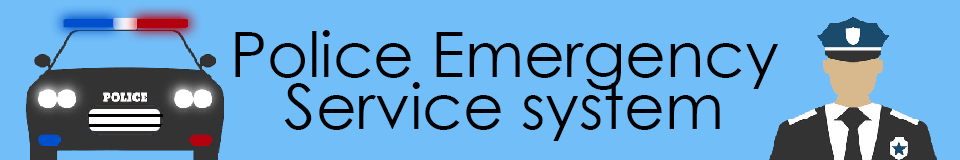
<style>
.page{position:relative;width:960px;height:160px;background:#72bef9}
.page>*{position:absolute;margin:0}
.t1{font:62.6px "CenturyGothic";color:#000000}
</style>
<div class="page">
<p class="t1" style="left:235px;top:30px;width:543px;height:111px;text-align:center">Police Emergency<br>Service system</p>
</div>
